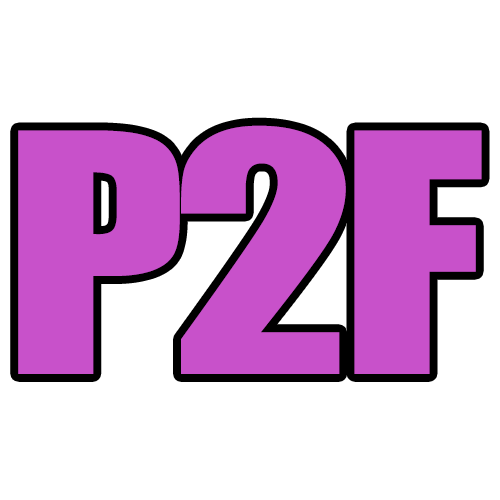
<style>
.page{position:relative;width:500px;height:500px;background:#ffffff}
.page>*{position:absolute;margin:0}
.t1{font:308px "Impact";letter-spacing:-0.04em;color:#c851ca;scale:1.18 1}
</style>
<div class="page">
<p class="t1" style="left:18px;top:125px;width:464px;height:249px">P2F</p>
</div>
